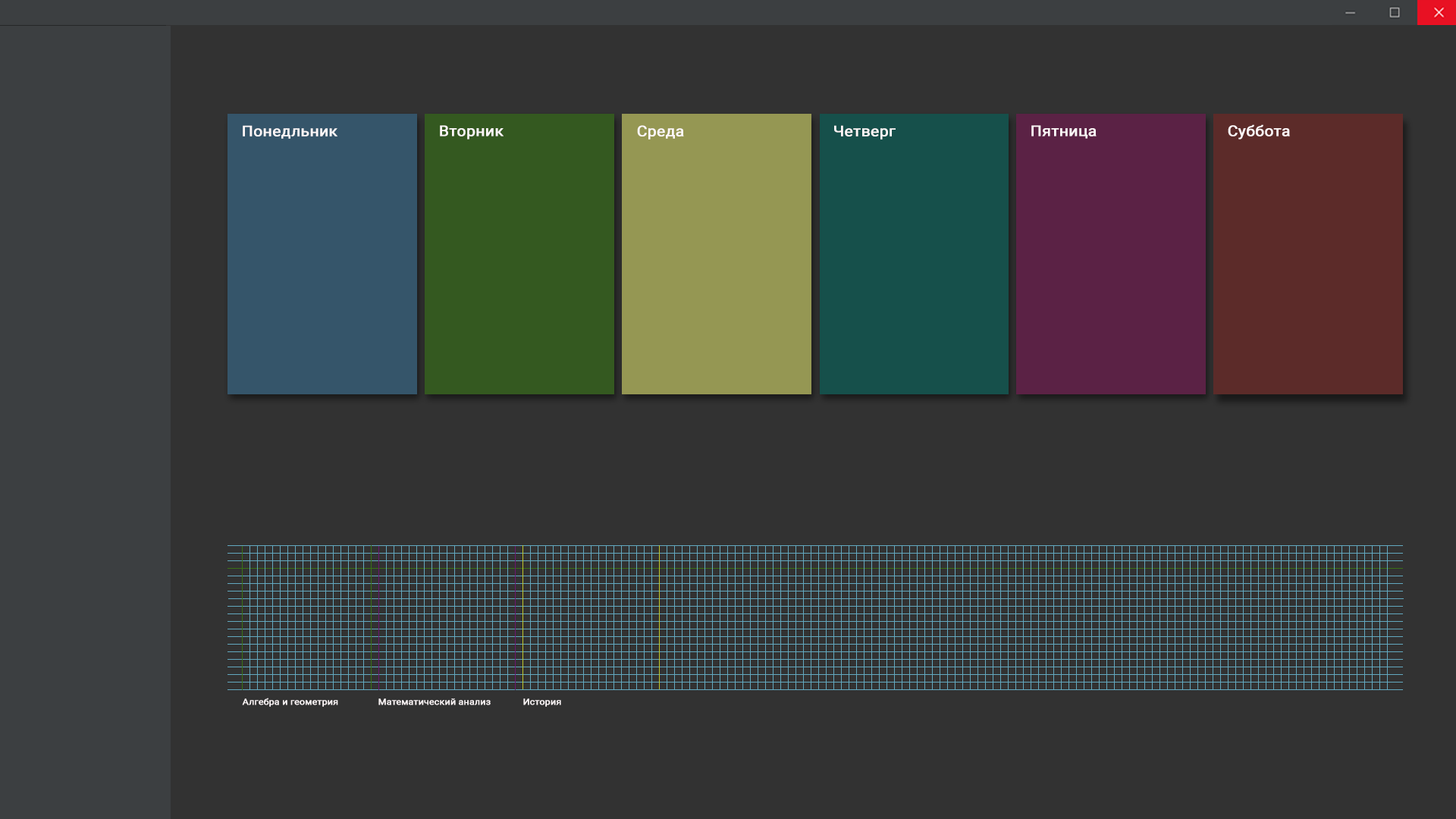
<style>
.page{position:relative;width:1456px;height:819px;background:#323232}
.page>*{position:absolute;margin:0}
.t1{font:14.7px "Roboto-Regular";color:#fdf7f8;font-weight:bold;scale:1.08 1}
.t2{font:8.6px "Roboto-Regular";color:#fdf7f8;font-weight:bold;scale:1.08 1}
</style>
<div class="page">
<p class="t1" style="left:243px;top:125px;width:94px;height:14px">Понедльник</p>
<p class="t1" style="left:440px;top:125px;width:64px;height:15px">Вторник</p>
<p class="t1" style="left:637px;top:125px;width:47px;height:15px">Среда</p>
<p class="t1" style="left:834px;top:125px;width:62px;height:15px">Четверг</p>
<p class="t1" style="left:1031px;top:125px;width:66px;height:14px">Пятница</p>
<p class="t1" style="left:1228px;top:124px;width:62px;height:16px">Суббота</p>
<p class="t2" style="left:242px;top:698px;width:96px;height:9px">Алгебра и геометрия</p>
<p class="t2" style="left:378px;top:698px;width:113px;height:7px">Математический анализ</p>
<p class="t2" style="left:523px;top:698px;width:38px;height:9px">История</p>
</div>
